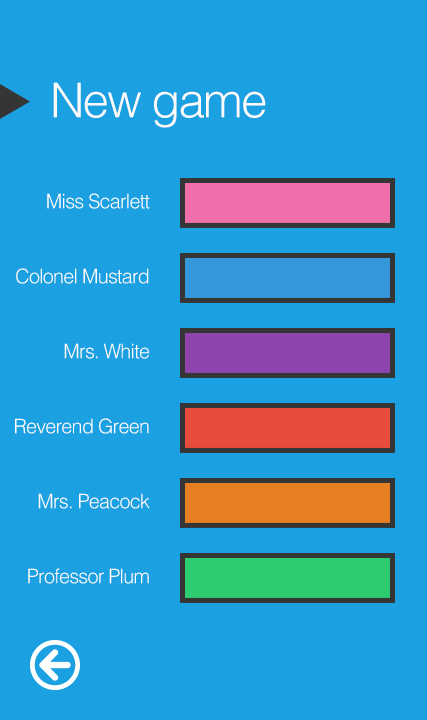
<style>
.page{position:relative;width:427px;height:720px;background:#1ba1e2}
.page>*{position:absolute;margin:0}
.t1{font:48px "Helvetica-Light";letter-spacing:-0.04em;color:#fffbfb}
.t2{font:20px "Helvetica-Light";letter-spacing:-0.04em;color:#fffbfb}
</style>
<div class="page">
<p class="t1" style="left:53px;top:82px;width:213px;height:46px">New game</p>
<p class="t2" style="left:47px;top:193px;width:103px;height:16px">Miss Scarlett</p>
<p class="t2" style="left:16px;top:268px;width:133px;height:16px">Colonel Mustard</p>
<p class="t2" style="left:64px;top:343px;width:85px;height:16px">Mrs. White</p>
<p class="t2" style="left:15px;top:418px;width:134px;height:16px">Reverend Green</p>
<p class="t2" style="left:38px;top:493px;width:112px;height:16px">Mrs. Peacock</p>
<p class="t2" style="left:28px;top:568px;width:121px;height:16px">Professor Plum</p>
</div>
